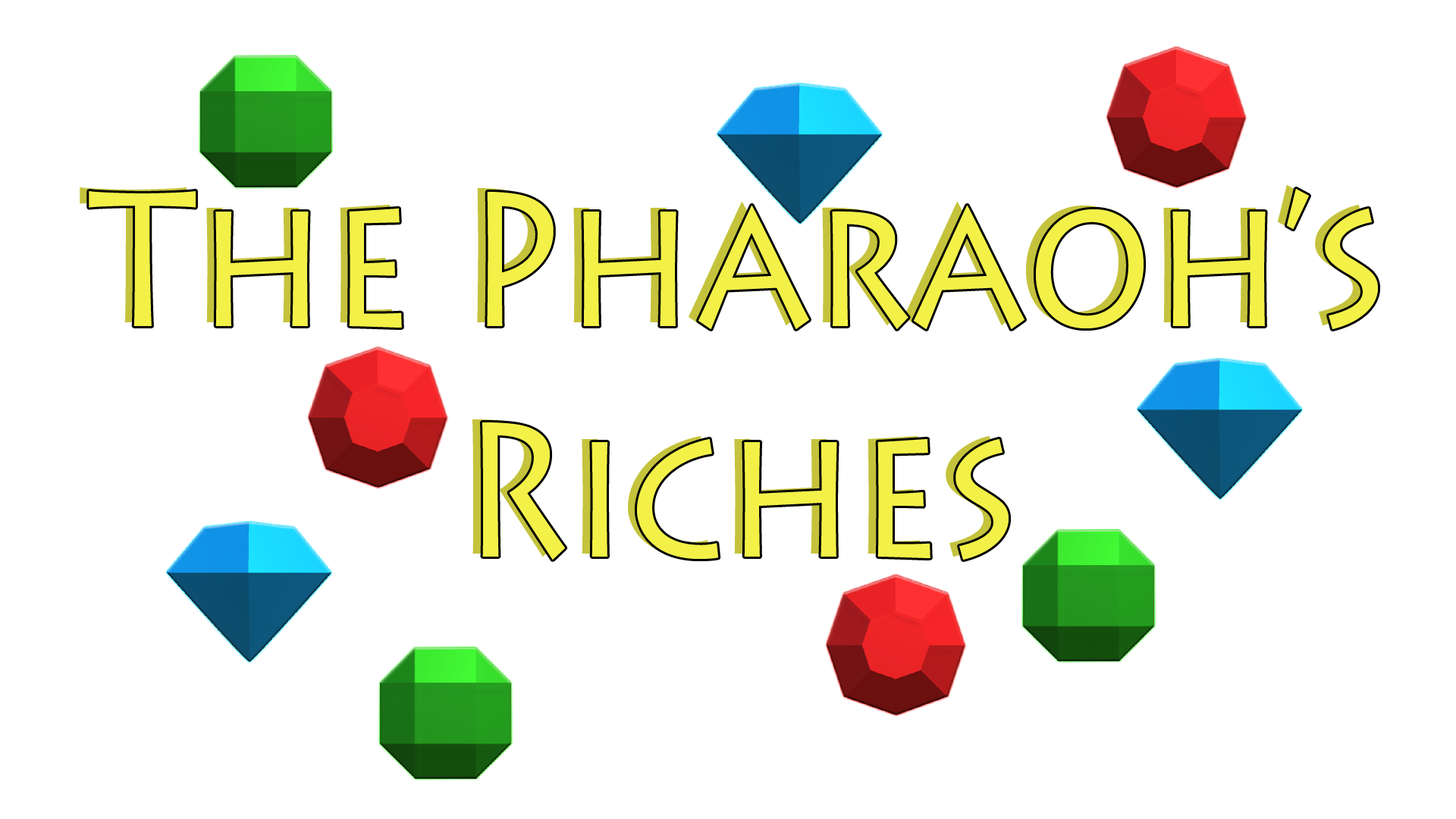
<style>
.page{position:relative;width:1456px;height:819px;background:#ffffff}
.page>*{position:absolute;margin:0}
.t1{font:192.3px "LithosPro-Regular";scale:0.84 1}
.t2{font:192.3px "LithosPro-Regular";color:#f3f148;scale:0.84 1}
</style>
<div class="page">
<p class="t1" style="left:80px;top:185px;width:1288px;height:372px;text-align:center">The Pharaoh’s <br>Riches</p>
<p class="t2" style="left:89px;top:189px;width:1289px;height:371px;text-align:center">The Pharaoh’s <br>Riches</p>
</div>
